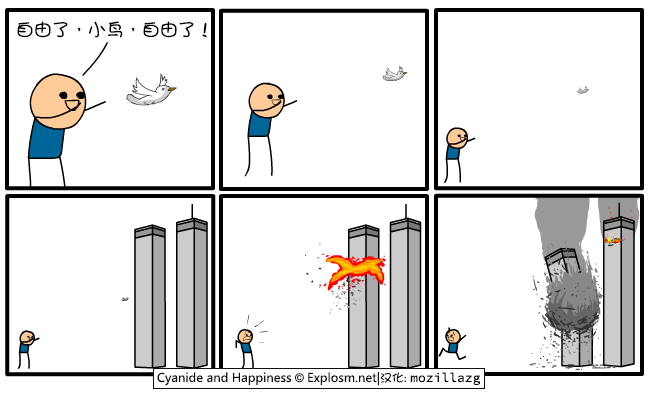
<style>
.page{position:relative;width:650px;height:400px;background:#ffffff}
.page>*{position:absolute;margin:0}
.t1{font:18px "DFGirl";color:#000000}
</style>
<div class="page">
<p class="t1" style="left:17px;top:21px;width:190px;height:17px">自由了，小鸟，自由了！</p>
</div>
